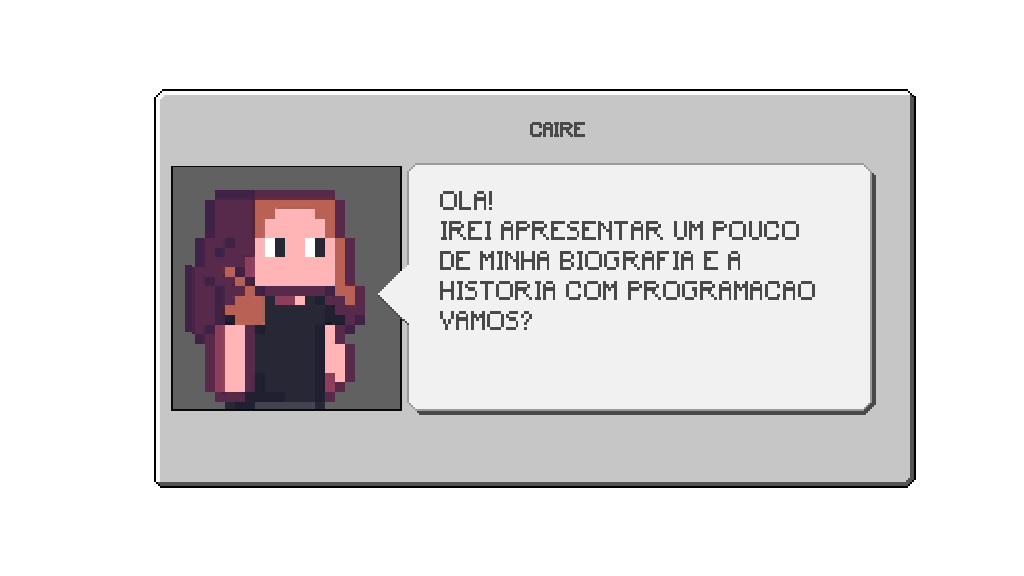
<style>
.page{position:relative;width:1024px;height:576px;background:#ffffff}
.page>*{position:absolute;margin:0}
.t1{font:19.6px "Minecraft";letter-spacing:0.02em;color:#494949;text-transform:uppercase;scale:0.86 1}
.t2{font:25.2px/30px "Minecraft";letter-spacing:0.05em;color:#494949;text-transform:uppercase;scale:0.86 1}
</style>
<div class="page">
<p class="t1" style="left:530px;top:122px;width:56px;height:16px">caire</p>
<p class="t2" style="left:440px;top:191px;width:375px;height:139px">Ola! <br>irei apresentar um pouco<br>de minha biografia e a<br>historia com programacao<br>vamos?</p>
</div>
